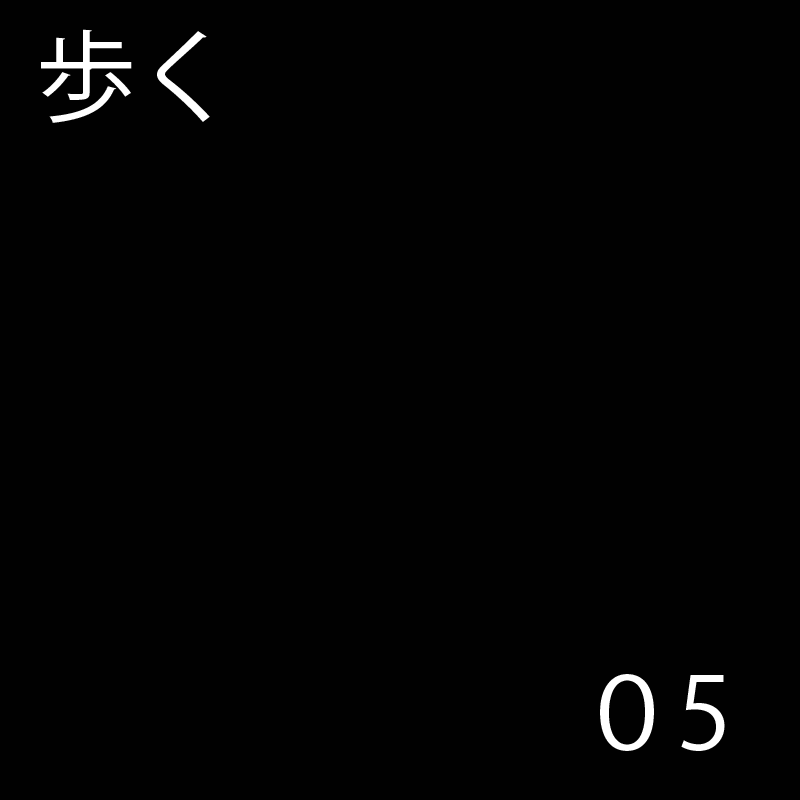
<style>
.page{position:relative;width:800px;height:800px;background:#010101}
.page>*{position:absolute;margin:0}
.t1{font:100px "KozGoPr6N-Regular";color:#ffffff}
</style>
<div class="page">
<p class="t1" style="left:41px;top:29px;width:169px;height:94px">歩く</p>
<p class="t1" style="left:600px;top:674px;width:125px;height:77px">０5</p>
</div>
